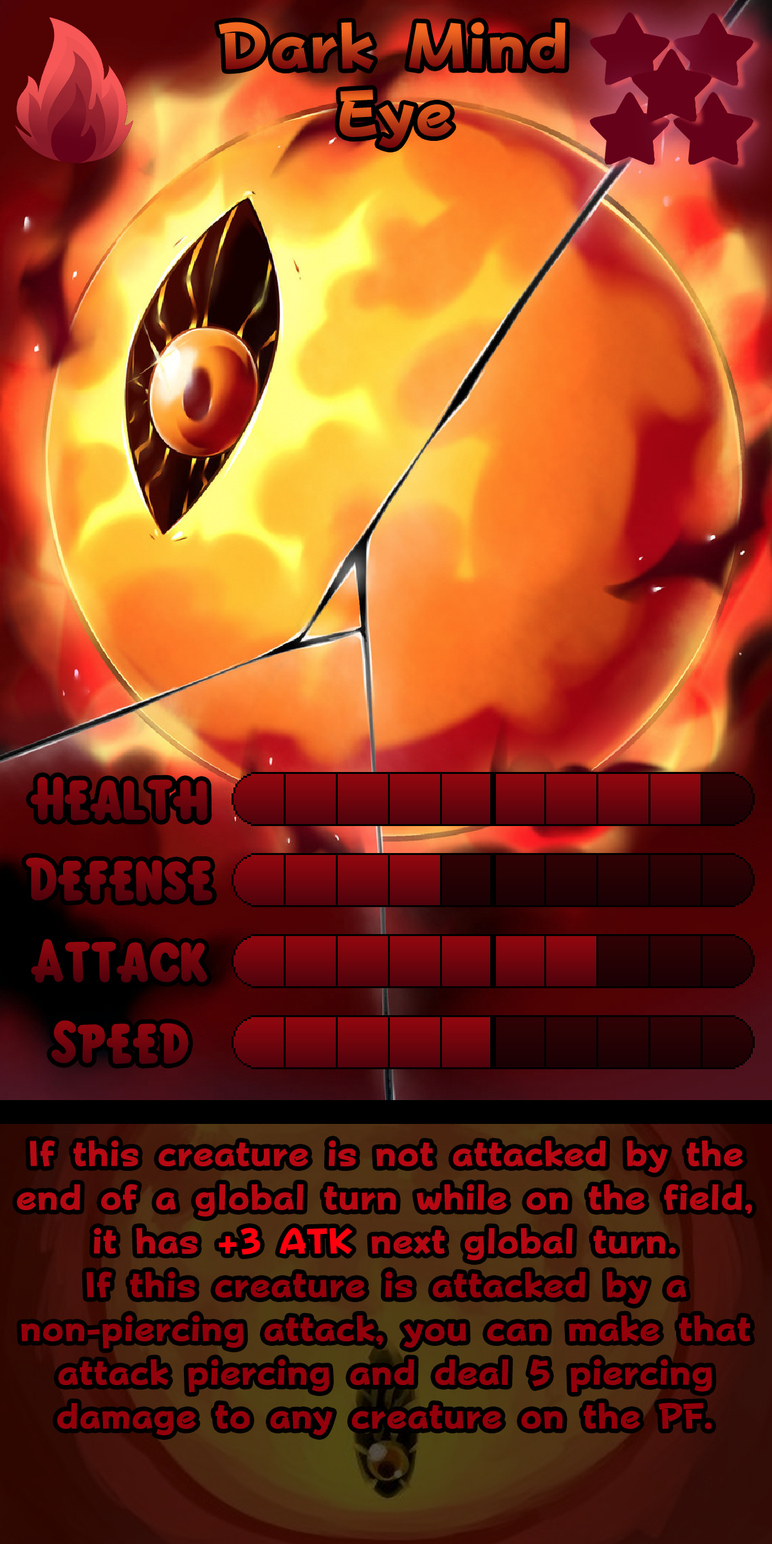
<style>
.page{position:relative;width:772px;height:1544px}
.page>*{position:absolute;margin:0}
.t1{font:92.7px "KirbyClassic"}
.t2{font:61.1px/43.8px "FOTPopHappinessStrp-ExtraBold";color:#92000b}
.t3{font:61.1px/43.8px "MyriadArabic-Regular";color:#b50913}
.t4{font:61.1px/43.8px "FOTPopHappinessStrp-ExtraBold";color:#b50913}
.t5{font:61.1px/43.8px "FOTPopHappinessStrp-ExtraBold";color:#ff000e}
</style>
<div class="page">
<p class="t1" style="left:30px;top:777px;width:178px;height:44px">Health</p>
<p class="t1" style="left:26px;top:858px;width:186px;height:44px">Defense</p>
<p class="t1" style="left:31px;top:939px;width:176px;height:44px">Attack</p>
<p class="t1" style="left:51px;top:1021px;width:138px;height:43px">Speed</p>
<p class="t2" style="left:17px;top:1140px;width:735px;height:296px;text-align:center"><span class="t3"></span><span class="t4">If this creature is not attacked by the end of a global turn while on the field, it has </span><span class="t5">+3 ATK</span><span class="t4"> next global turn. <br></span>If this creature is attacked by a non-piercing attack, you can make that attack piercing and deal 5 piercing damage to any creature on the PF.</p>
</div>
